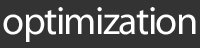
<style>
.page{position:relative;width:200px;height:48px;background:#333333}
.page>*{position:absolute;margin:0}
.t1{font:40px "MyriadPro-Regular";letter-spacing:-0.04em;color:#ffffff}
</style>
<div class="page">
<p class="t1" style="left:3px;top:7px;width:193px;height:35px">optimization</p>
</div>
